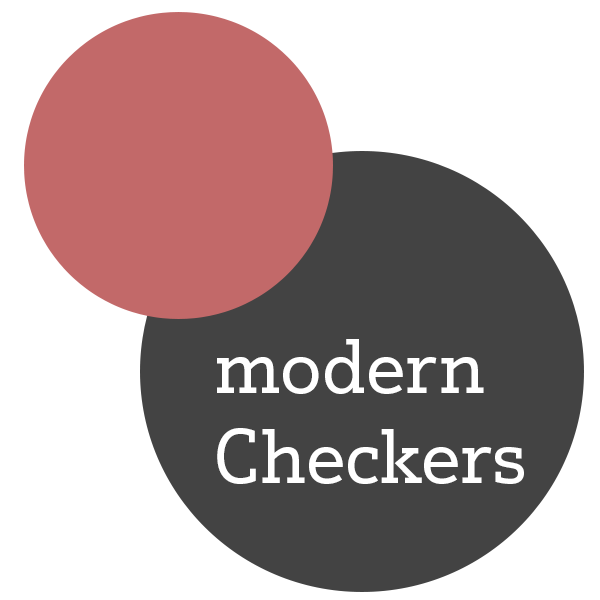
<style>
.page{position:relative;width:600px;height:600px;background:#ffffff}
.page>*{position:absolute;margin:0}
.t1{font:75px "JustusPro-Regular";color:#ffffff}
</style>
<div class="page">
<p class="t1" style="left:217px;top:339px;width:307px;height:145px">modern<br>Checkers</p>
</div>
